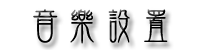
<style>
.page{position:relative;width:200px;height:50px;background:#ffffff}
.page>*{position:absolute;margin:0}
.t1{font:36px "DFJinWen-W3-WIN-BF";color:#000000;font-weight:bold}
</style>
<div class="page">
<p class="t1" style="left:33px;top:9px;width:135px;height:35px">音樂設置</p>
</div>
